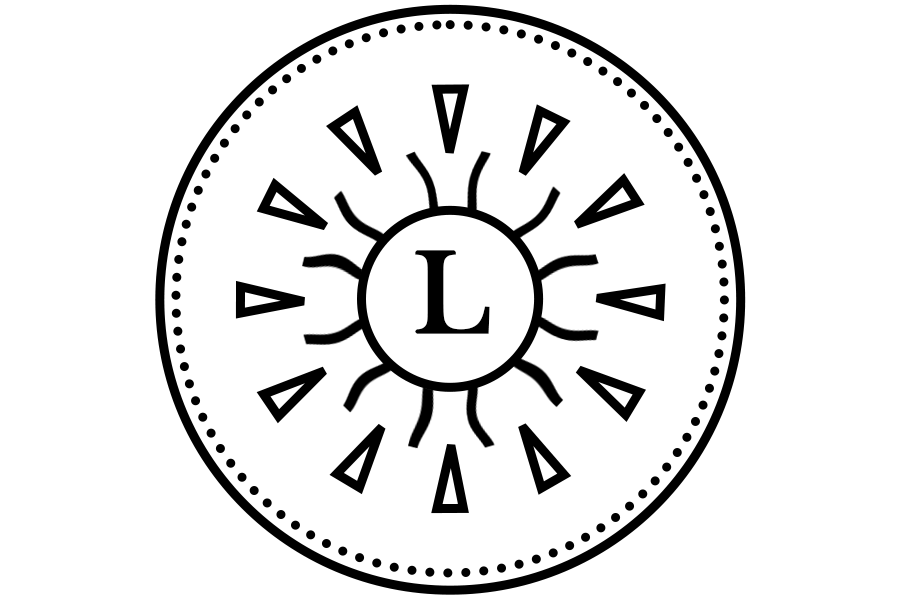
<style>
.page{position:relative;width:900px;height:600px;background:#ffffff}
.page>*{position:absolute;margin:0}
.t1{font:119.8px "BaskOldFace";color:#000000;font-weight:bold}
</style>
<div class="page">
<p class="t1" style="left:415px;top:250px;width:75px;height:84px">L</p>
</div>
